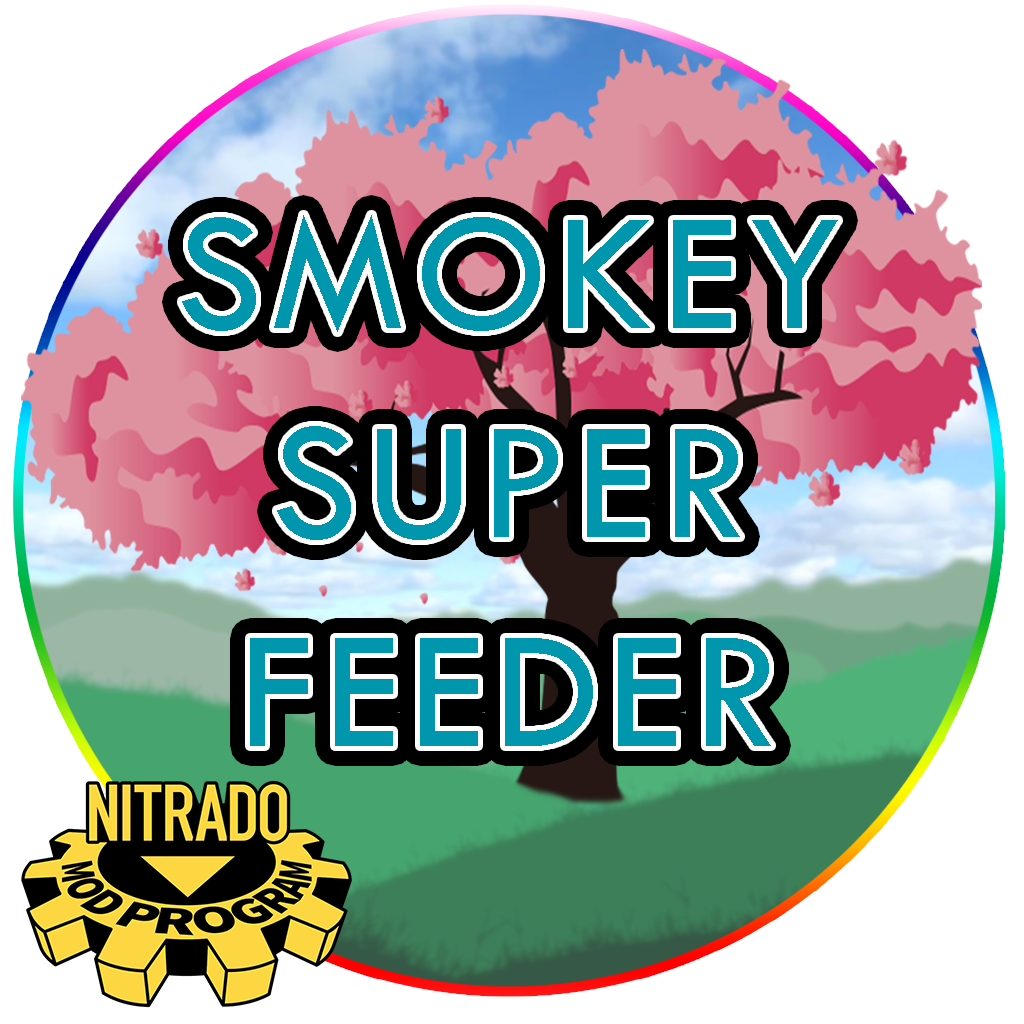
<style>
.page{position:relative;width:1024px;height:1024px;background:#ffffff}
.page>*{position:absolute;margin:0}
.t1{font:173.9px "ARK-Regular";letter-spacing:0.05em;color:#0097ae}
</style>
<div class="page">
<p class="t1" style="left:182px;top:215px;width:656px;height:531px;text-align:center">SMOKEY<br>SUPER<br>FEEDER</p>
</div>
